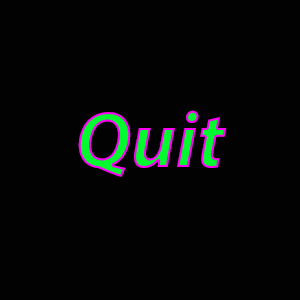
<style>
.page{position:relative;width:300px;height:300px;background:#020202}
.page>*{position:absolute;margin:0}
.t1{font:80px "MyriadPro-BoldIt"}
</style>
<div class="page">
<p class="t1" style="left:78px;top:110px;width:149px;height:67px">Quit</p>
</div>
